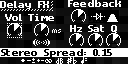
<style>
.page{position:relative;width:128px;height:64px;background:#ffffff}
.page>*{position:absolute;margin:0}
.t1{font:15px "MatchupPro";color:#ffffff}
.t2{font:15px "Eighties";color:#ffffff}
.t3{font:15px "MatchupPro";color:#000000}
</style>
<div class="page">
<p class="t1" style="left:0px;top:1px;width:49px;height:8px">Delay FX</p>
<p class="t1" style="left:68px;top:0px;width:53px;height:7px">Feedback</p>
<p class="t1" style="left:5px;top:14px;width:49px;height:7px">Vol Time</p>
<p class="t2" style="left:52px;top:29px;width:9px;height:4px">ms</p>
<p class="t1" style="left:70px;top:25px;width:47px;height:8px">Hz Sat Q</p>
<p class="t3" style="left:1px;top:49px;width:111px;height:8px">Stereo Spread: 0.15</p>
<p class="t1" style="left:21px;top:59px;width:10px;height:3px">+-</p>
</div>
